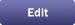
<style>
.page{position:relative;width:75px;height:25px}
.page>*{position:absolute;margin:0}
.t1{font:12px "FranklinGothic-Medium";letter-spacing:0.025em;color:#ffffff}
</style>
<div class="page">
<p class="t1" style="left:28px;top:8px;width:20px;height:9px">Edit</p>
<p class="t1" style="left:28px;top:8px;width:20px;height:9px">Edit</p>
</div>
